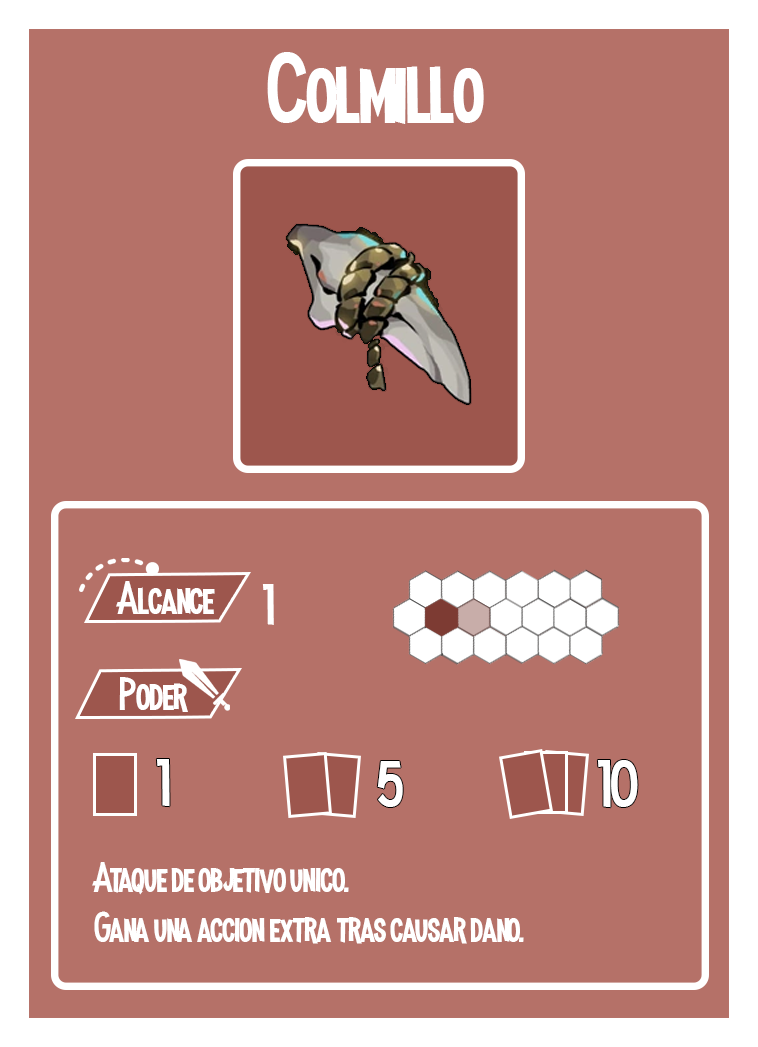
<style>
.page{position:relative;width:758px;height:1047px;background:#b57168}
.page>*{position:absolute;margin:0}
.t1{font:100px "MadnessHyperactive";color:#ffffff}
.t2{font:45.8px "MadnessHyperactive";color:#ffffff}
.t3{font:56.9px "MadnessHyperactive";color:#ffffff}
.t4{font:66.3px "MadnessHyperactive";color:#ffffff}
.t5{font:41.7px "MadnessHyperactive";color:#ffffff}
</style>
<div class="page">
<p class="t1" style="left:267px;top:52px;width:217px;height:72px">Colmillo</p>
<p class="t2" style="left:116px;top:581px;width:99px;height:33px">Alcance</p>
<p class="t3" style="left:262px;top:584px;width:12px;height:41px">1</p>
<p class="t2" style="left:119px;top:677px;width:69px;height:35px">Poder</p>
<p class="t4" style="left:156px;top:759px;width:14px;height:48px">1</p>
<p class="t4" style="left:377px;top:761px;width:26px;height:46px">5</p>
<p class="t4" style="left:597px;top:760px;width:41px;height:48px">10</p>
<p class="t5" style="left:92px;top:862px;width:432px;height:82px">Ataque de objetivo unico.<br>Gana una accion extra tras causar dano.</p>
</div>
